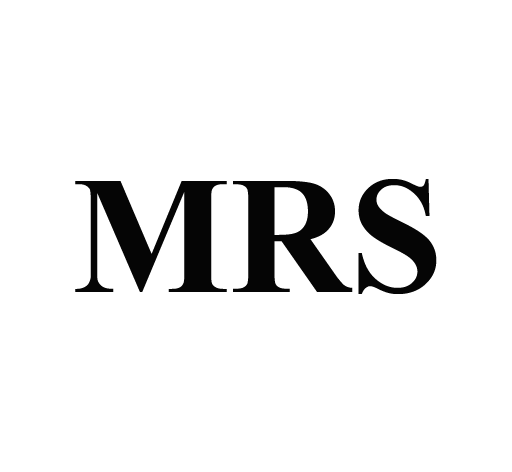
<style>
.page{position:relative;width:512px;height:472px;background:#ffffff}
.page>*{position:absolute;margin:0}
.t1{font:167.1px "TimesNewRomanPS-BoldMT";color:#050505}
</style>
<div class="page">
<p class="t1" style="left:75px;top:179px;width:362px;height:115px">MRS</p>
</div>
